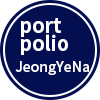
<style>
.page{position:relative;width:100px;height:100px;background:#030f51}
.page>*{position:absolute;margin:0}
.t1{font:20px/18px "NotoSansKR-Bold";color:#ffffff}
.t2{font:14px "NotoSansKR-Medium";color:#ffffff}
</style>
<div class="page">
<p class="t1" style="left:21px;top:18px;width:47px;height:37px">port<br>polio</p>
<p class="t2" style="left:15px;top:61px;width:74px;height:14px">JeongYeNa</p>
</div>
